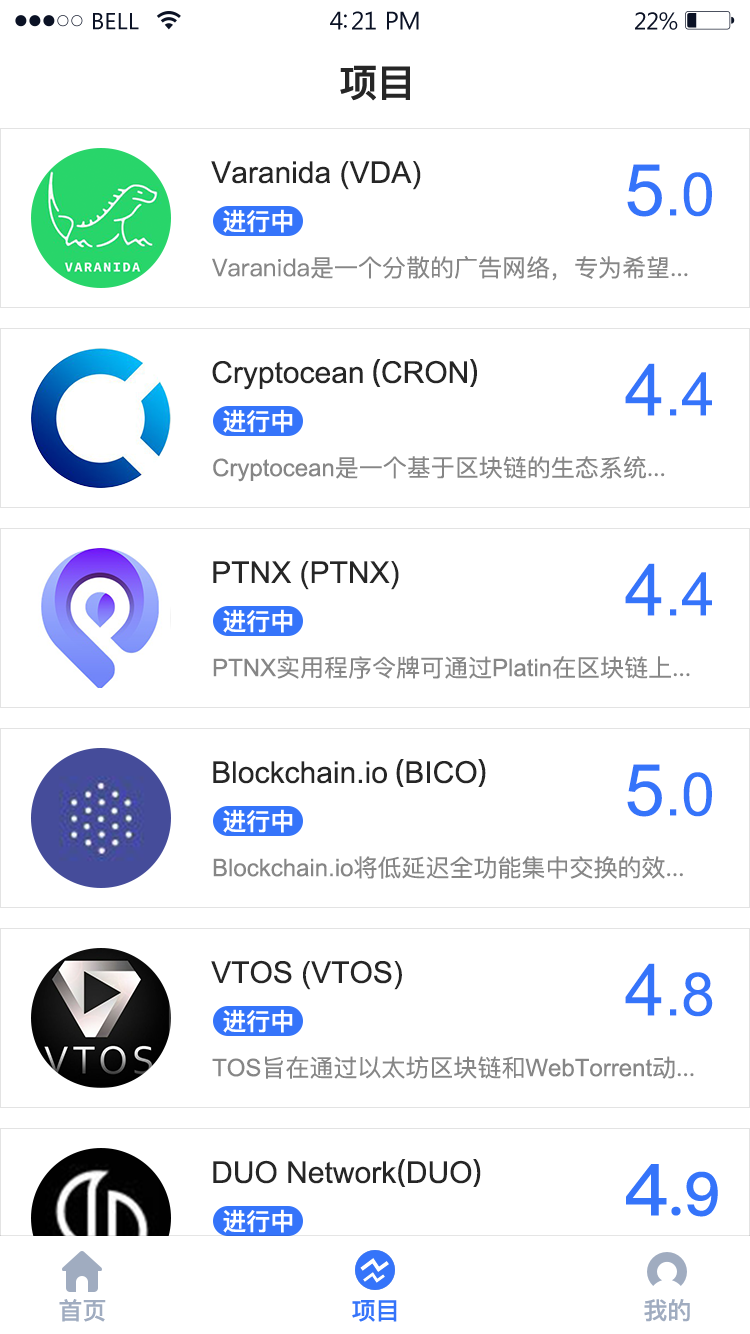
<style>
.page{position:relative;width:750px;height:1334px;background:#ffffff}
.page>*{position:absolute;margin:0}
.t1{font:38px "PingFang-SC-Heavy";color:#262626}
.t2{font:30px "ArialMT";color:#262626}
.t3{font:60px "ArialMT";color:#3574fa}
.t4{font:72px "ArialMT";color:#3574fa}
.t5{font:24px "PingFang-SC-Heavy";color:#ffffff}
.t6{font:24px "PingFangSC-Regular";color:#868686}
.t7{font:30px "AdobeHeitiStd-Regular";color:#262626}
.t8{font:30px "ArialMT";color:#262626;text-transform:uppercase}
.t9{font:24px "ArialMT";color:#868686}
.t10{font:60px "PingFang-SC-Bold";color:#3574fa}
.t11{font:72px "PingFang-SC-Bold";color:#3574fa}
.t12{font:24px "PingFang-SC-Bold";color:#a0acc0}
.t13{font:24px "PingFang-SC-Bold";color:#3574fa}
</style>
<div class="page">
<p class="t1" style="left:340px;top:65px;width:70px;height:36px">项目</p>
<p class="t2" style="left:211px;top:161px;width:210px;height:29px">Varanida (VDA)</p>
<p class="t3" style="left:627px;top:164px;width:85px;height:53px"><span class="t4">5</span>.0</p>
<p class="t5" style="left:223px;top:209px;width:70px;height:24px">进行中</p>
<p class="t6" style="left:212px;top:256px;width:476px;height:25px">Varanida是一个分散的广告网络，专为希望...</p>
<p class="t2" style="left:212px;top:359px;width:265px;height:31px">Cryptocean<span class="t7"> (</span><span class="t8">cron</span><span class="t7">)</span></p>
<p class="t3" style="left:625px;top:363px;width:87px;height:53px"><span class="t4">4</span>.4</p>
<p class="t5" style="left:223px;top:409px;width:70px;height:24px">进行中</p>
<p class="t6" style="left:213px;top:456px;width:452px;height:26px"><span class="t9">Cryptocean</span>是一个基于区块链的生态系统...</p>
<p class="t2" style="left:213px;top:561px;width:186px;height:29px">PTNX (PTNX)</p>
<p class="t3" style="left:625px;top:563px;width:87px;height:53px"><span class="t4">4</span>.4</p>
<p class="t5" style="left:223px;top:609px;width:70px;height:24px">进行中</p>
<p class="t6" style="left:213px;top:656px;width:477px;height:23px"><span class="t9">PTNX</span>实用程序令牌可通过<span class="t9">Platin</span>在区块链上...</p>
<p class="t2" style="left:213px;top:759px;width:273px;height:28px">Blockchain.io<span class="t7"> (</span>BICO<span class="t7">)</span></p>
<p class="t3" style="left:627px;top:764px;width:85px;height:53px"><span class="t4">5</span>.0</p>
<p class="t5" style="left:223px;top:809px;width:70px;height:24px">进行中</p>
<p class="t6" style="left:213px;top:856px;width:470px;height:23px"><span class="t9">Blockchain.io</span>将低延迟全功能集中交换的效...</p>
<p class="t2" style="left:211px;top:960px;width:191px;height:30px">VTOS (VTOS)</p>
<p class="t3" style="left:625px;top:963px;width:88px;height:54px"><span class="t4">4</span>.8</p>
<p class="t5" style="left:223px;top:1009px;width:70px;height:24px">进行中</p>
<p class="t6" style="left:212px;top:1056px;width:482px;height:23px"><span class="t9">TOS</span>旨在通过以太坊区块链和<span class="t9">WebTorrent</span>動...</p>
<p class="t2" style="left:213px;top:1159px;width:268px;height:28px">DUO Network<span class="t7">(</span>DUO<span class="t7">)</span></p>
<p class="t10" style="left:626px;top:1164px;width:92px;height:53px"><span class="t11">4</span>.9</p>
<p class="t5" style="left:223px;top:1209px;width:70px;height:24px">进行中</p>
<p class="t12" style="left:59px;top:1299px;width:47px;height:23px">首页</p>
<p class="t13" style="left:352px;top:1300px;width:45px;height:22px">项目</p>
<p class="t12" style="left:644px;top:1299px;width:46px;height:23px">我的</p>
</div>
